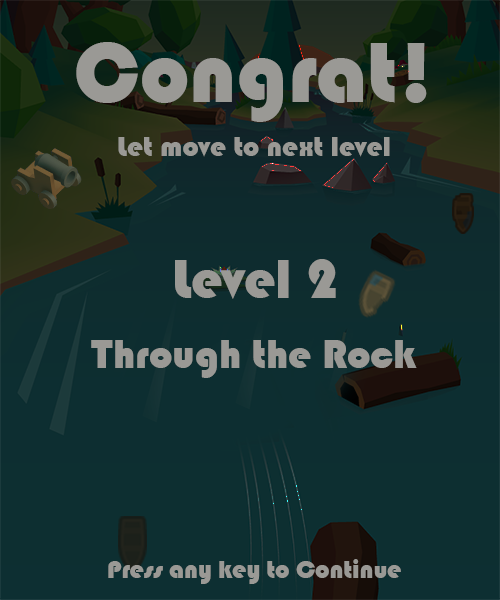
<style>
.page{position:relative;width:500px;height:600px}
.page>*{position:absolute;margin:0}
.t1{font:88.2px "Bauhaus93";color:#9a9995}
.t2{font:29.1px "Bauhaus93";color:#9a9995}
.t3{font:56.7px "Bauhaus93";color:#9a9995}
.t4{font:41.9px "Bauhaus93";color:#9a9995}
.t5{font:25.7px "Bauhaus93";color:#9a9995}
</style>
<div class="page">
<p class="t1" style="left:76px;top:42px;width:351px;height:80px">Congrat!</p>
<p class="t2" style="left:118px;top:137px;width:272px;height:20px">Let move to next level</p>
<p class="t3" style="left:175px;top:259px;width:161px;height:40px">Level 2</p>
<p class="t4" style="left:91px;top:340px;width:326px;height:38px">Through the Rock</p>
<p class="t5" style="left:108px;top:559px;width:293px;height:25px">Press any key to Continue</p>
</div>
